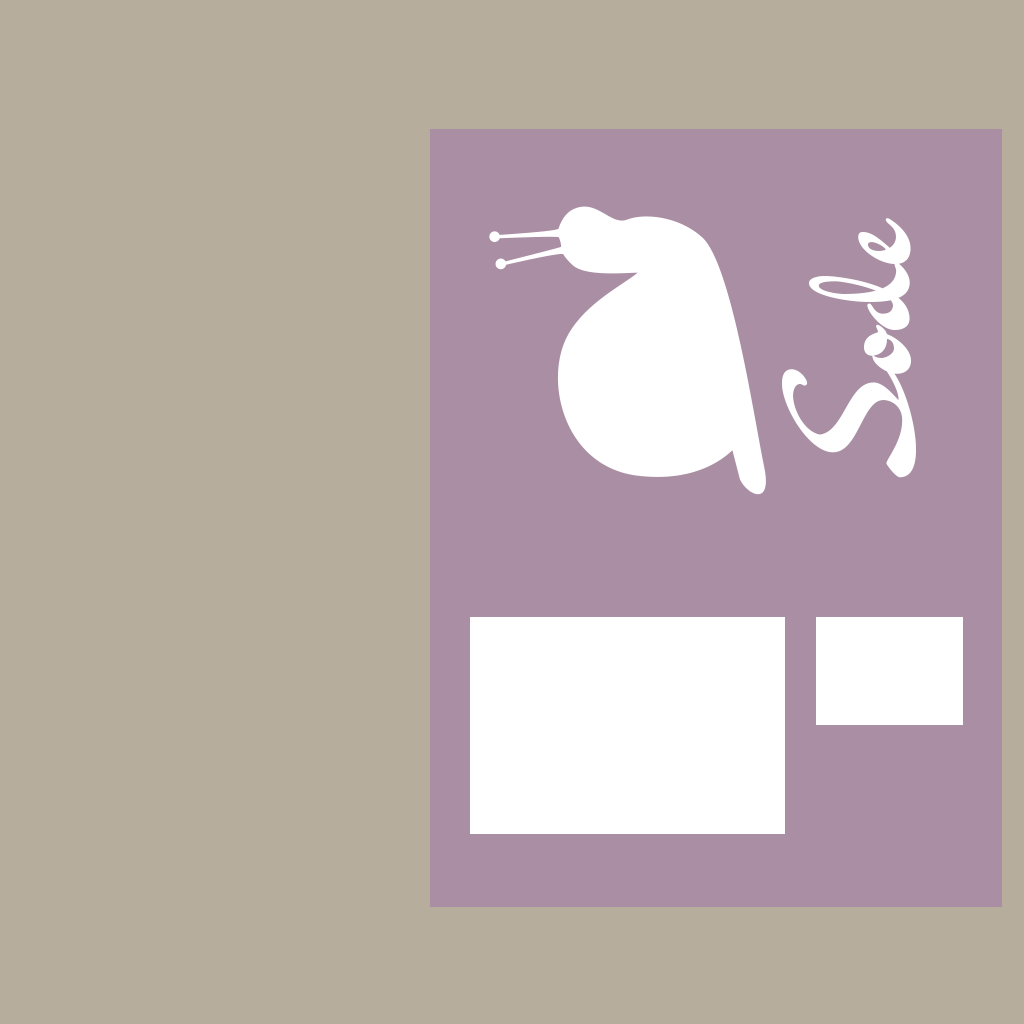
<style>
.page{position:relative;width:1024px;height:1024px;background:#b7ad9c}
.page>*{position:absolute;margin:0}
.t1{font:157.9px "DrSugiyamaPro";color:#ffffff}
</style>
<div class="page">
<p class="t1" style="left:782px;top:218px;width:134px;height:260px;rotate:-90deg">Sode</p>
</div>
